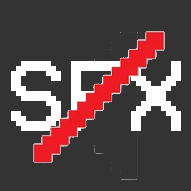
<style>
.page{position:relative;width:191px;height:191px;background:#333333}
.page>*{position:absolute;margin:0}
.t1{font:80px "VCROSDMonoRUSbyD";color:#ffffff}
</style>
<div class="page">
<p class="t1" style="left:11px;top:61px;width:170px;height:70px">SFX</p>
</div>
